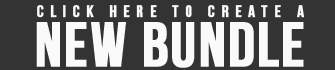
<style>
.page{position:relative;width:335px;height:70px;background:#333333}
.page>*{position:absolute;margin:0}
.t1{font:16.7px "BebasNeue";letter-spacing:0.385em;color:#fafafa;font-weight:bold}
</style>
<div class="page">
<p class="t1" style="left:37px;top:5px;width:268px;height:13px">click here to create a</p>
</div>
